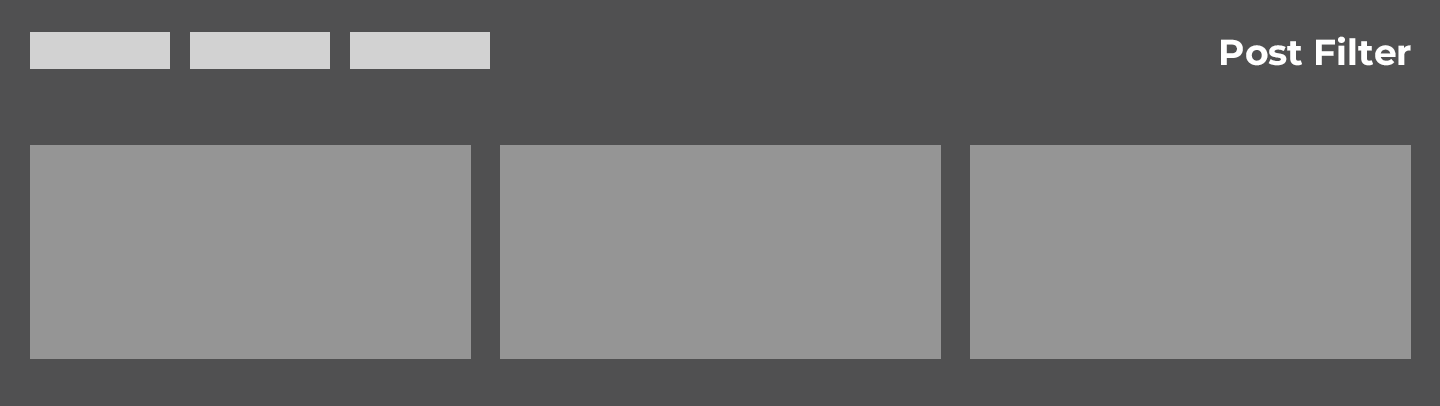
<style>
.page{position:relative;width:1440px;height:406px;background:#959595}
.page>*{position:absolute;margin:0}
.t1{font:36px "Montserrat-Bold";color:#ffffff}
</style>
<div class="page">
<p class="t1" style="left:1221px;top:36px;width:190px;height:30px">Post Filter</p>
</div>
